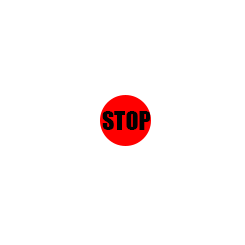
<style>
.page{position:relative;width:245px;height:245px;background:#ffffff}
.page>*{position:absolute;margin:0}
.t1{font:24px "Impact";color:#000000}
</style>
<div class="page">
<p class="t1" style="left:102px;top:111px;width:49px;height:19px">STOP</p>
</div>
